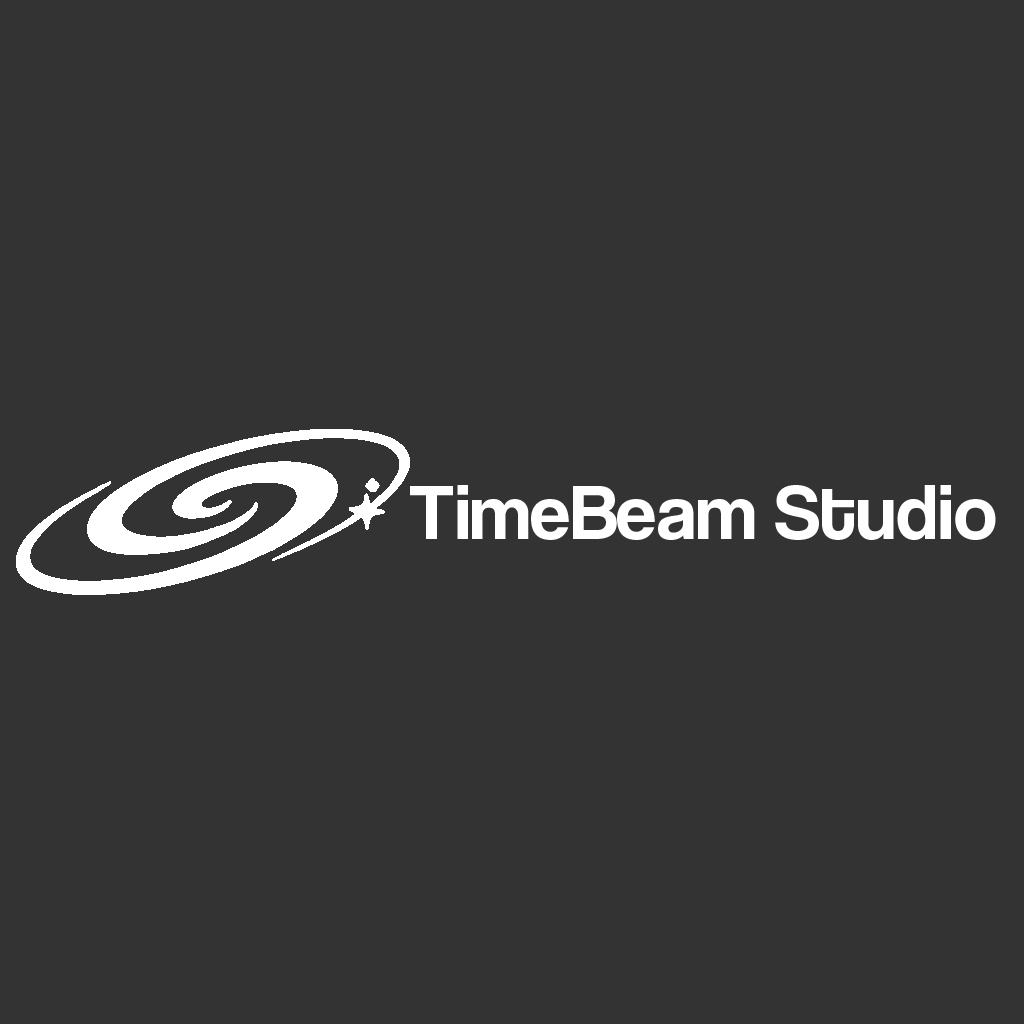
<style>
.page{position:relative;width:1024px;height:1024px;background:#333333}
.page>*{position:absolute;margin:0}
.t1{font:80px "Coolvetica-Regular";color:#ffffff}
</style>
<div class="page">
<p class="t1" style="left:410px;top:485px;width:586px;height:55px">TimeBeam Studio</p>
</div>
